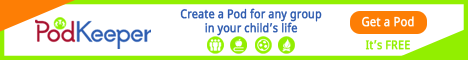
<style>
.page{position:relative;width:468px;height:60px;background:#ffffff}
.page>*{position:absolute;margin:0}
.t1{font:12px "NotoSans";color:#2e5baf;font-weight:bold;scale:0.88 1}
.t2{font:12.6px "NotoSans";color:#feffff;font-weight:bold;scale:0.88 1}
.t3{font:12px "NotoSans";color:#92ef00;font-weight:bold;scale:0.88 1}
</style>
<div class="page">
<p class="t1" style="left:180px;top:8px;width:142px;height:28px;text-align:center">Create a Pod for any group<br>in your child’s life</p>
<p class="t2" style="left:362px;top:16px;width:52px;height:11px">Get a Pod</p>
<p class="t3" style="left:365px;top:40px;width:45px;height:10px">It’s FREE</p>
</div>
